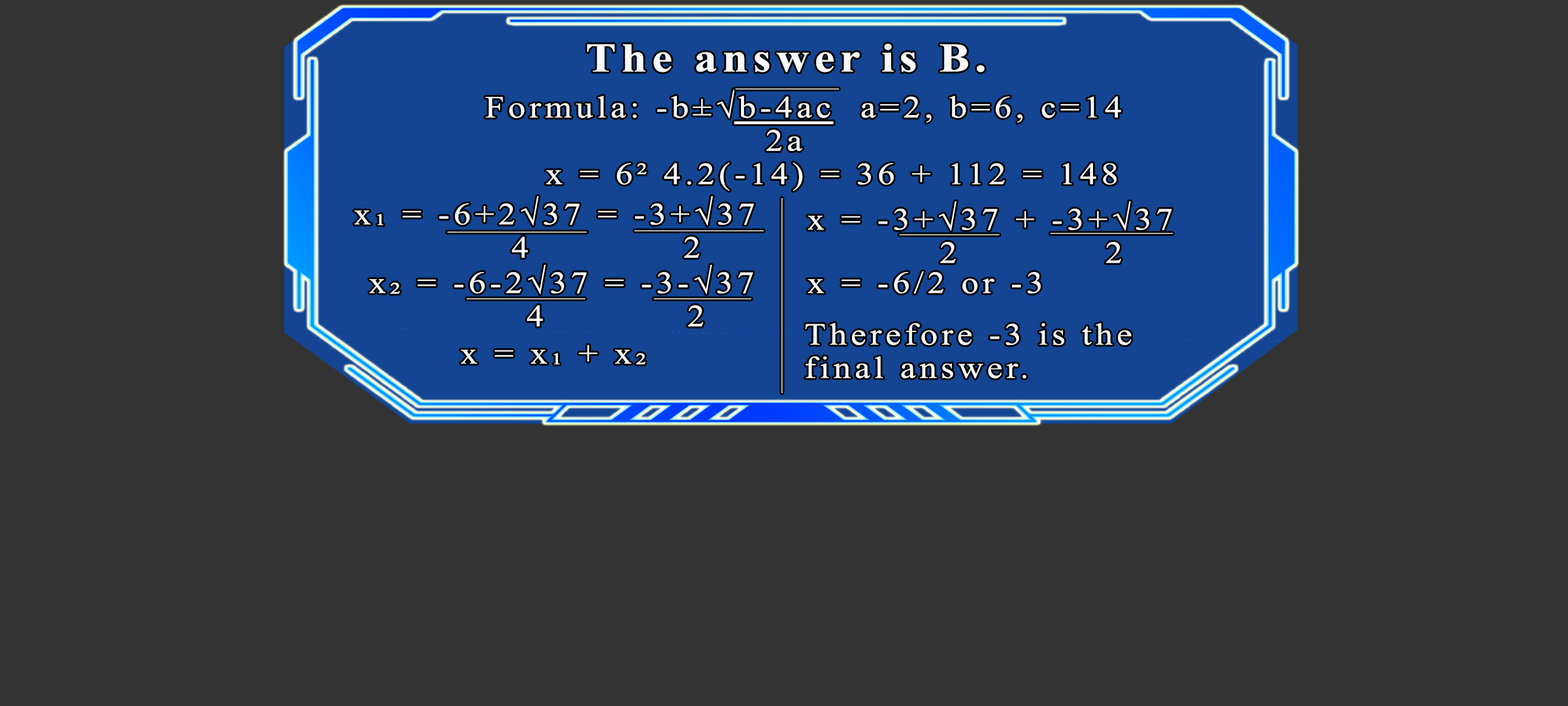
<style>
.page{position:relative;width:1568px;height:706px;background:#333333}
.page>*{position:absolute;margin:0}
.t1{font:40.8px "TimesNewRomanPS-BoldMT";letter-spacing:0.115em;color:#f7f9fb;scale:1.12 1}
.t2{font:30.9px/33.2px "TimesNewRomanPSMT";letter-spacing:0.115em;color:#f7f9fb;scale:1.12 1}
.t3{font:5.3px "GillSans-UltraBoldCondensed";letter-spacing:0.115em;scale:55.43 1}
.t4{font:23.7px "GillSans-UltraBoldCondensed";letter-spacing:0.115em;color:#f7f9fb;scale:11.84 1}
.t5{font:30.9px "TimesNewRomanPSMT";letter-spacing:0.115em;color:#f7f9fb;scale:1.12 1}
.t6{font:5.3px "GillSans-UltraBoldCondensed";letter-spacing:0.115em;scale:104.68 1}
.t7{font:5.3px "GillSans-UltraBoldCondensed";letter-spacing:0.115em;scale:74.81 1}
.t8{font:5.3px "GillSans-UltraBoldCondensed";letter-spacing:0.115em;scale:69.43 1}
.t9{font:5.3px "GillSans-UltraBoldCondensed";letter-spacing:0.115em;scale:53.55 1}
.t10{font:5.3px "GillSans-UltraBoldCondensed";letter-spacing:0.115em;scale:65.66 1}
.t11{font:5.3px "GillSans-UltraBoldCondensed";letter-spacing:0.115em;scale:63.78 1}
.t12{font:5.3px "GillSans-UltraBoldCondensed";letter-spacing:0.115em;scale:52.21 1}
</style>
<div class="page">
<p class="t1" style="left:587px;top:43px;width:398px;height:30px">The answer is B.</p>
<p class="t2" style="left:485px;top:89px;width:636px;height:62px">Formula: -b±√b-4ac  a=2, b=6, c=14<br>                2a</p>
<p class="t3" style="left:735px;top:88px;width:104px;height:2px">_</p>
<p class="t4" style="left:734px;top:121px;width:100px;height:3px">_</p>
<p class="t5" style="left:546px;top:162px;width:571px;height:29px">x = 6² 4.2(-14) = 36 + 112 = 148</p>
<p class="t2" style="left:354px;top:196px;width:400px;height:62px">x₁ = -6+2√37 = -3+√37 <br>           4            2</p>
<p class="t6" style="left:781px;top:198px;width:2px;height:195px;rotate:90deg">_</p>
<p class="t2" style="left:808px;top:201px;width:364px;height:62px">x = -3+√37 + -3+√37 <br>         2            2</p>
<p class="t7" style="left:447px;top:231px;width:140px;height:2px">_</p>
<p class="t8" style="left:634px;top:230px;width:130px;height:1px">_</p>
<p class="t9" style="left:899px;top:234px;width:101px;height:1px">_</p>
<p class="t10" style="left:1050px;top:233px;width:123px;height:1px">_</p>
<p class="t2" style="left:369px;top:265px;width:384px;height:62px">x₂ = -6-2√37 = -3-√37 <br>           4            2</p>
<p class="t5" style="left:808px;top:271px;width:233px;height:22px">x = -6/2 or -3</p>
<p class="t11" style="left:466px;top:298px;width:119px;height:1px">_</p>
<p class="t12" style="left:653px;top:298px;width:98px;height:1px">_</p>
<p class="t2" style="left:805px;top:323px;width:327px;height:55px">Therefore -3 is the<br>final answer.</p>
<p class="t5" style="left:461px;top:345px;width:184px;height:20px">x = x₁ + x₂</p>
</div>
